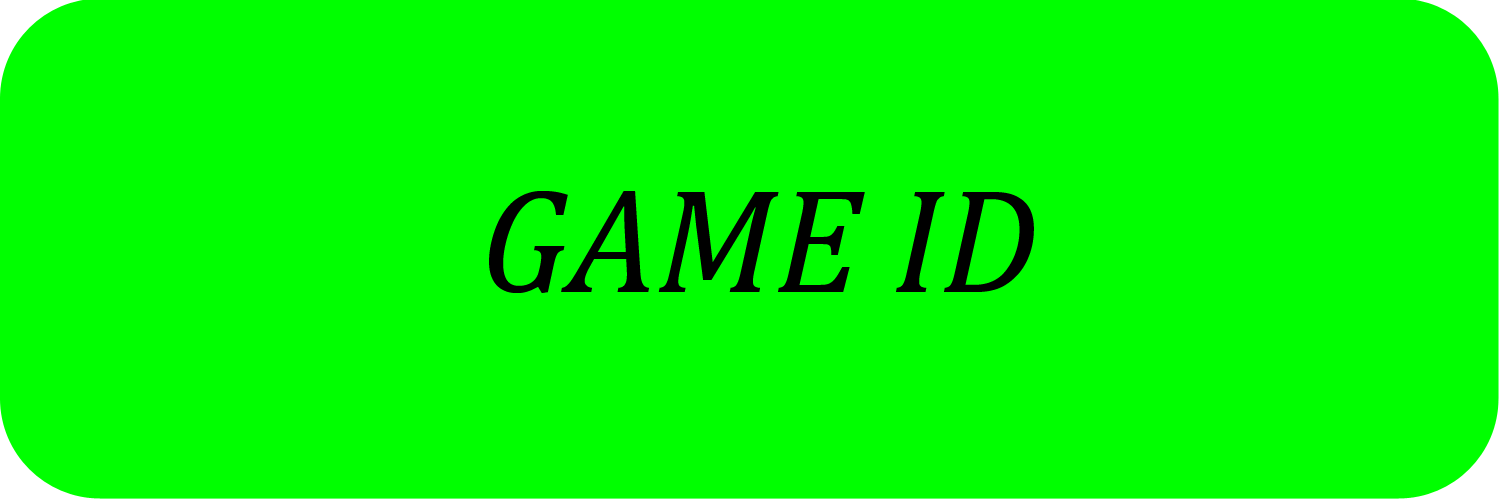
<style>
.page{position:relative;width:1500px;height:500px;background:#00ff00}
.page>*{position:absolute;margin:0}
.t1{font:150px "Cambria-Italic";color:#000000}
</style>
<div class="page">
<p class="t1" style="left:489px;top:191px;width:545px;height:102px">GAME ID</p>
</div>
